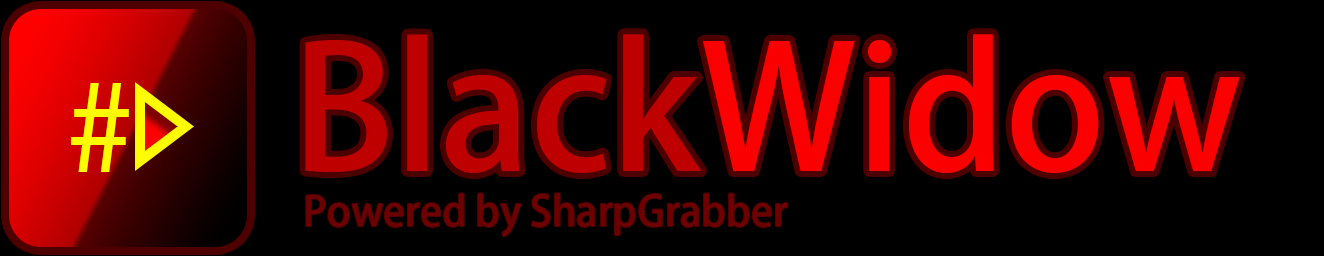
<style>
.page{position:relative;width:1324px;height:256px;background:#000000}
.page>*{position:absolute;margin:0}
.t1{font:170px "AdobeFanHeitiStd-Bold";color:#bf0000}
.t2{font:170px "AdobeFanHeitiStd-Bold";color:#fa0000}
.t3{font:136.5px "MyriadPro-Regular";color:#fffc00}
.t4{font:40.4px "AdobeFanHeitiStd-Bold";color:#6d0000}
</style>
<div class="page">
<p class="t1" style="left:305px;top:34px;width:935px;height:140px">Black<span class="t2">Widow</span></p>
<p class="t3" style="left:71px;top:83px;width:58px;height:89px">#</p>
<p class="t4" style="left:306px;top:193px;width:482px;height:44px">Powered by SharpGrabber</p>
</div>
